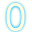
<style>
.page{position:relative;width:32px;height:32px;background:#ffffff}
.page>*{position:absolute;margin:0}
.t1{font:37.9px "ÈÞ¸Õ°íµñ";color:#fffae2;scale:1.11 1}
</style>
<div class="page">
<p class="t1" style="left:6px;top:3px;width:19px;height:28px">0</p>
</div>
